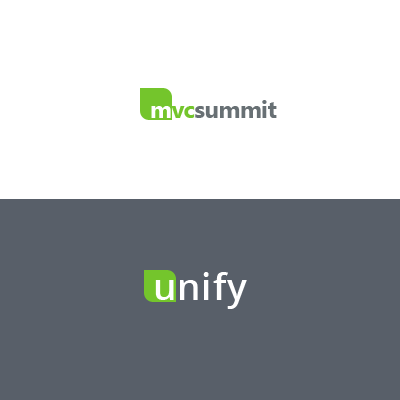
<style>
.page{position:relative;width:400px;height:400px;background:#ffffff}
.page>*{position:absolute;margin:0}
.t1{font:24px "SegoeUI-Bold";letter-spacing:-0.025em;color:#687074}
.t2{font:24px "SegoeUI-Bold";letter-spacing:-0.025em;color:#ffffff}
.t3{font:24px "SegoeUI-Bold";letter-spacing:-0.025em;color:#74c52c}
.t4{font:37px "OpenSans-Semibold";letter-spacing:0.02em;color:#ffffff}
</style>
<div class="page">
<p class="t1" style="left:151px;top:100px;width:126px;height:18px"><span class="t2">m</span><span class="t3">vc</span>summit</p>
<p class="t4" style="left:155px;top:272px;width:92px;height:37px">unify</p>
</div>
